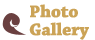
<style>
.page{position:relative;width:95px;height:40px;background:#ffffff}
.page>*{position:absolute;margin:0}
.t1{font:18px/18px "ChaparralPro-Bold";letter-spacing:-0.025em;color:#cba356;font-weight:bold}
</style>
<div class="page">
<p class="t1" style="left:29px;top:4px;width:60px;height:36px">Photo<br>Gallery</p>
</div>
